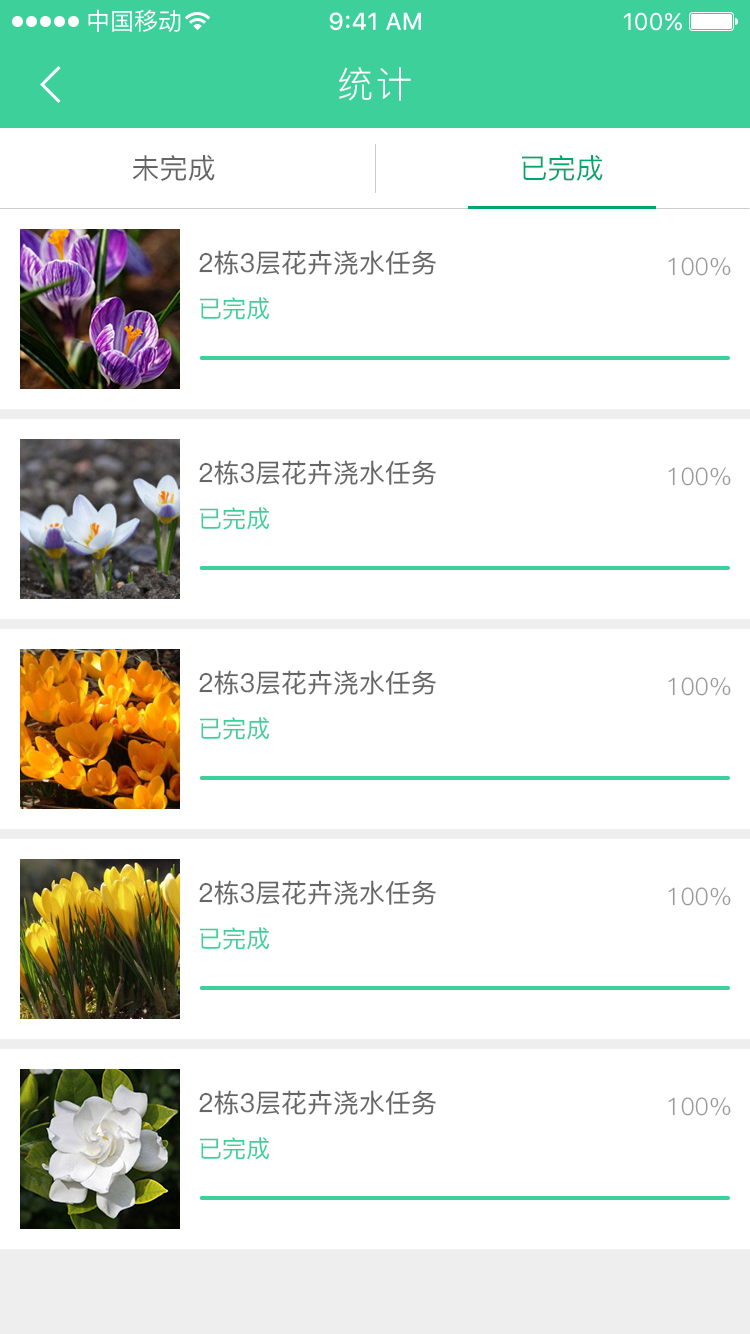
<style>
.page{position:relative;width:750px;height:1334px;background:#ffffff}
.page>*{position:absolute;margin:0}
.t1{font:36px "PingFang-SC-Regular";letter-spacing:0.1em;color:#ffffff}
.t2{font:28px "PingFang-SC-Medium";color:#666666}
.t3{font:28px "PingFang-SC-Medium";color:#04a76b}
.t4{font:26px "PingFang-SC-Medium";color:#666666}
.t5{font:24px "PingFang-SC-Regular";color:#999999}
.t6{font:24px "PingFang-SC-Medium";color:#3dd09a}
</style>
<div class="page">
<p class="t1" style="left:339px;top:67px;width:72px;height:34px">统计</p>
<p class="t2" style="left:133px;top:155px;width:82px;height:26px">未完成</p>
<p class="t3" style="left:522px;top:155px;width:81px;height:26px">已完成</p>
<p class="t4" style="left:199px;top:250px;width:237px;height:25px">2栋3层花卉浇水任务</p>
<p class="t5" style="left:668px;top:257px;width:63px;height:19px">100%</p>
<p class="t6" style="left:199px;top:297px;width:71px;height:23px">已完成</p>
<p class="t4" style="left:199px;top:460px;width:237px;height:25px">2栋3层花卉浇水任务</p>
<p class="t5" style="left:668px;top:467px;width:63px;height:19px">100%</p>
<p class="t6" style="left:199px;top:507px;width:71px;height:23px">已完成</p>
<p class="t4" style="left:199px;top:670px;width:237px;height:25px">2栋3层花卉浇水任务</p>
<p class="t5" style="left:668px;top:677px;width:63px;height:19px">100%</p>
<p class="t6" style="left:199px;top:717px;width:71px;height:23px">已完成</p>
<p class="t4" style="left:199px;top:880px;width:237px;height:25px">2栋3层花卉浇水任务</p>
<p class="t5" style="left:668px;top:887px;width:63px;height:19px">100%</p>
<p class="t6" style="left:199px;top:927px;width:71px;height:23px">已完成</p>
<p class="t4" style="left:199px;top:1090px;width:237px;height:25px">2栋3层花卉浇水任务</p>
<p class="t5" style="left:668px;top:1097px;width:63px;height:19px">100%</p>
<p class="t6" style="left:199px;top:1137px;width:71px;height:23px">已完成</p>
</div>
